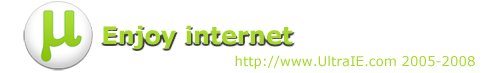
<style>
.page{position:relative;width:499px;height:73px;background:#ffffff}
.page>*{position:absolute;margin:0}
.t1{font:24px "Verdana-Bold";color:#a5d82b}
.t2{font:13.3px "Verdana";color:#a5d82b}
</style>
<div class="page">
<p class="t1" style="left:103px;top:25px;width:190px;height:24px">Enjoy internet</p>
<p class="t2" style="left:235px;top:55px;width:240px;height:14px">http://www.UltraIE.com 2005-2008</p>
</div>
